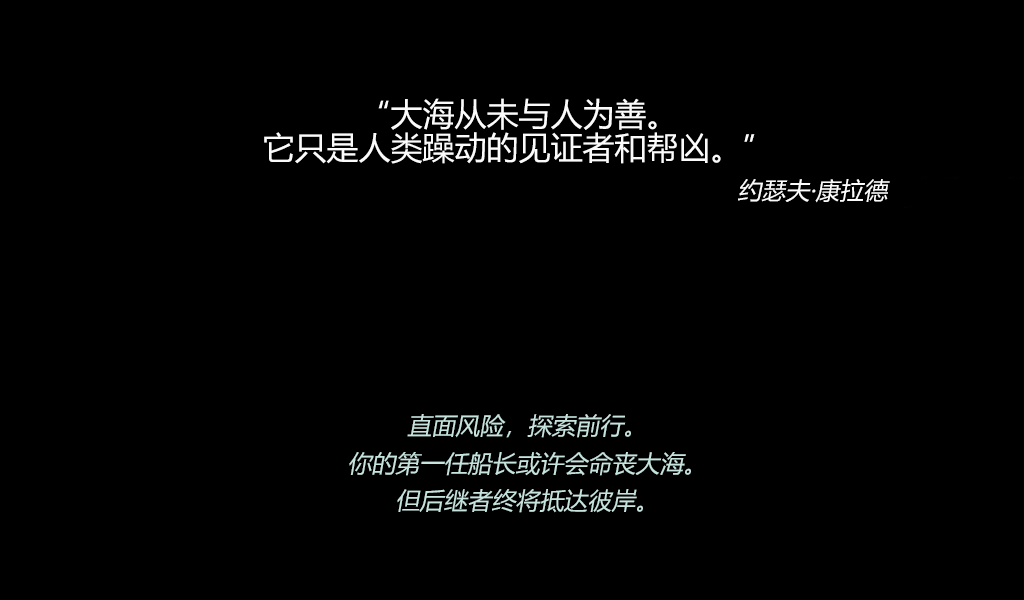
<style>
.page{position:relative;width:1024px;height:600px;background:#000000}
.page>*{position:absolute;margin:0}
.t1{font:32px/33.3px "MicrosoftYaHei";color:#fbfbfb}
.t2{font:24px "MicrosoftYaHei";color:#fbfbfb;font-style:italic}
.t3{font:24px/37.3px "MicrosoftYaHei";color:#c6e3de;font-style:italic}
</style>
<div class="page">
<p class="t1" style="left:264px;top:98px;width:491px;height:66px;text-align:center">“大海从未与人为善。<br>它只是人类躁动的见证者和帮凶。”</p>
<p class="t2" style="left:738px;top:179px;width:152px;height:24px">约瑟夫·康拉德</p>
<p class="t3" style="left:349px;top:414px;width:342px;height:99px;text-align:center">直面风险，探索前行。<br>你的第一任船长或许会命丧大海。<br>但后继者终将抵达彼岸。</p>
</div>
